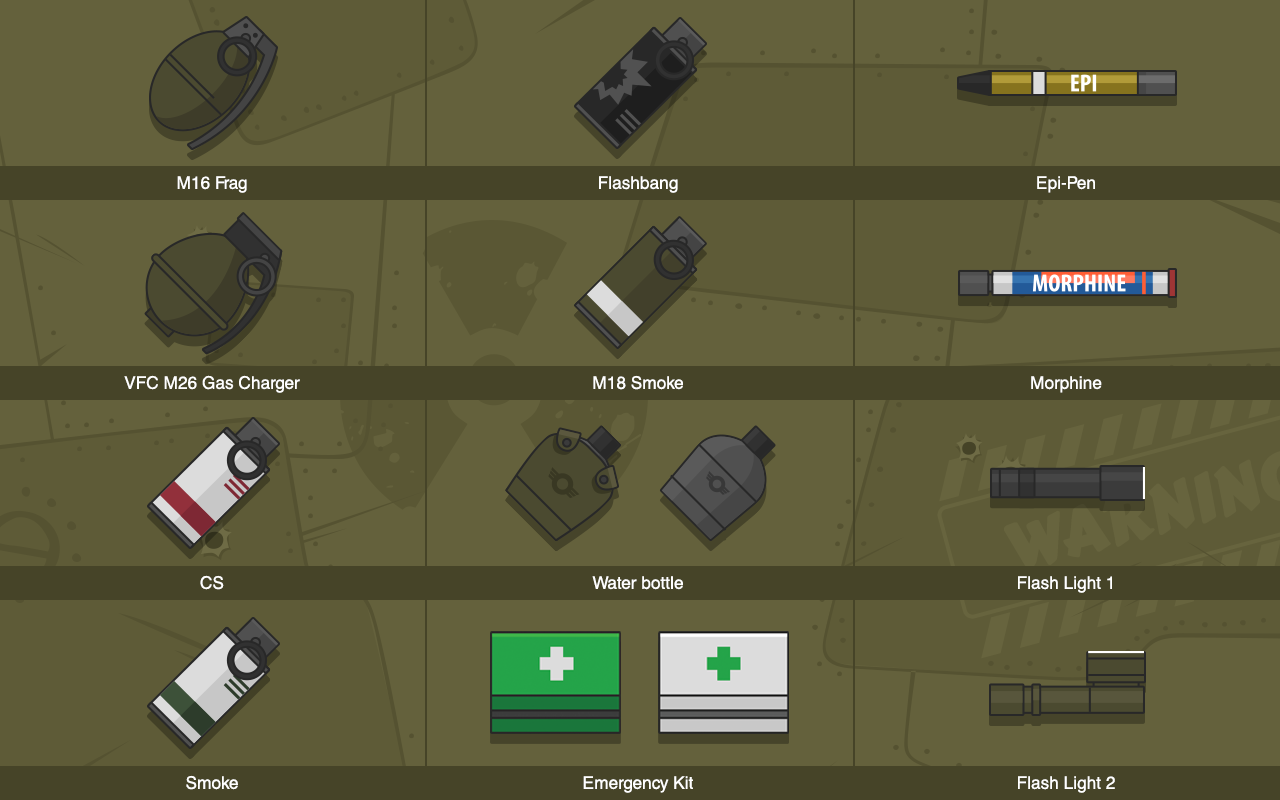
<style>
.page{position:relative;width:1280px;height:800px;background:#64613c}
.page>*{position:absolute;margin:0}
.t1{font:17.4px/200px "HelveticaCE-Regular";color:#ffffff}
</style>
<div class="page">
<p class="t1" style="left:124px;top:176px;width:176px;height:614px;text-align:center">M16 Frag<br>VFC M26 Gas Charger<br>CS<br>Smoke</p>
<p class="t1" style="left:583px;top:176px;width:110px;height:617px;text-align:center">Flashbang<br>M18 Smoke<br>Water bottle<br>Emergency Kit</p>
<p class="t1" style="left:1018px;top:176px;width:97px;height:617px;text-align:center">Epi-Pen<br>Morphine<br>Flash Light 1<br>Flash Light 2</p>
</div>
